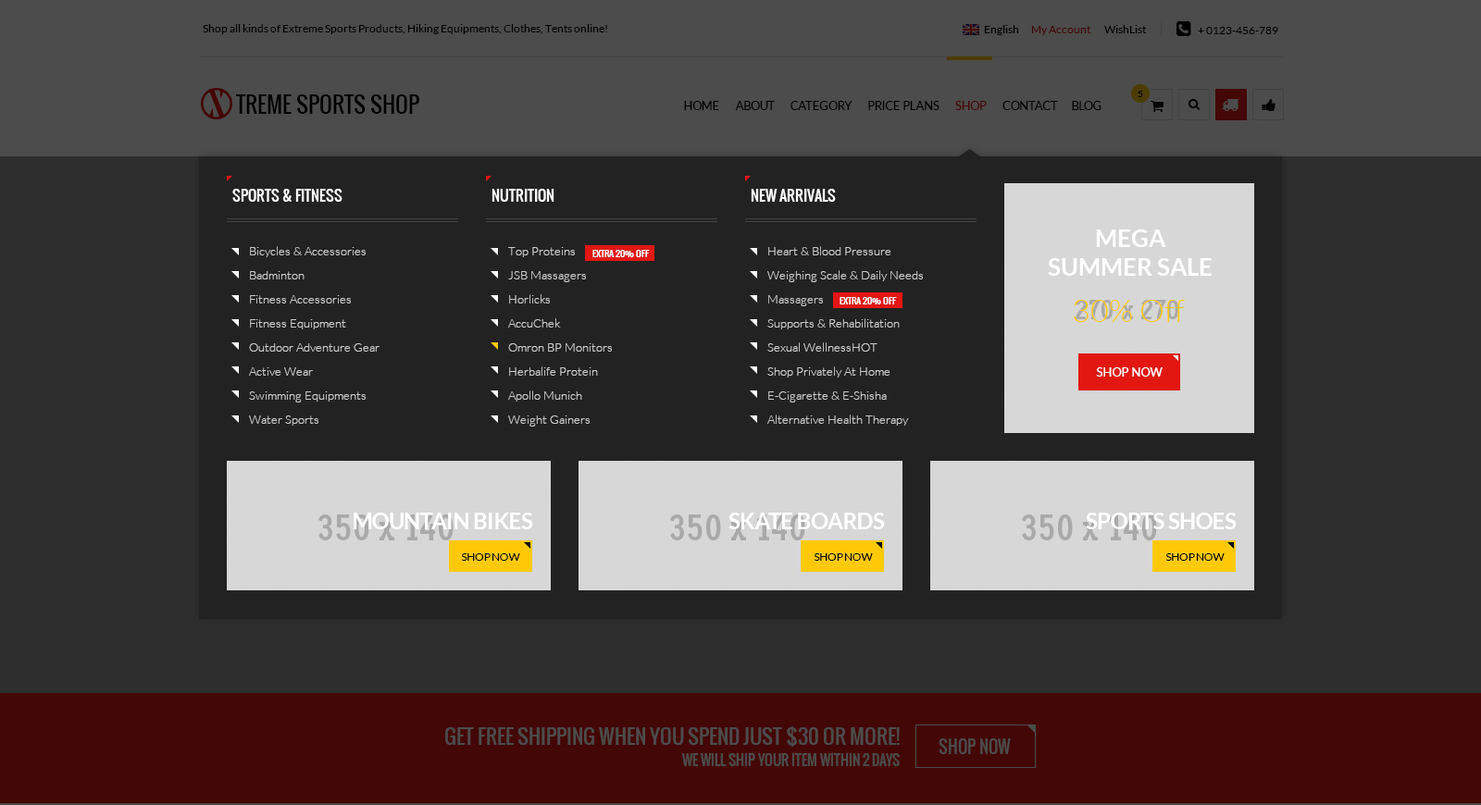
<style>
.page{position:relative;width:1481px;height:805px;background:#2e2e2e}
.page>*{position:absolute;margin:0}
.t1{font:14.8px "Oswald-Regular";color:#ffffff}
.t2{font:24.1px/28.9px "Lato-Bold";color:#ffffff}
.t3{font:12px/24.1px "Lato-Light";color:#cccccc}
.t4{font:9.3px "Oswald-Regular";color:#ffffff}
.t5{font:31.5px "Lato-Light";color:#ffc908}
.t6{font:12px "Lato-Regular";color:#ffffff}
.t7{font:22.2px "Lato-Bold";letter-spacing:-0.03em;color:#ffffff}
.t8{font:11.1px "Lato-Regular";letter-spacing:-0.025em;color:#000000}
</style>
<div class="page">
<p class="t1" style="left:232px;top:189px;width:110px;height:13px">SPORTS &amp; FITNESS</p>
<p class="t1" style="left:491px;top:189px;width:63px;height:13px">NUTRITION</p>
<p class="t1" style="left:751px;top:189px;width:85px;height:13px">NEW ARRIVALS</p>
<p class="t2" style="left:1048px;top:230px;width:164px;height:46px;text-align:center">MEGA<br>SUMMER SALE</p>
<p class="t3" style="left:249px;top:246px;width:130px;height:180px">Bicycles &amp; Accessories<br>Badminton<br>Fitness Accessories<br>Fitness Equipment<br>Outdoor Adventure Gear<br>Active Wear<br>Swimming Equipments<br>Water Sports</p>
<p class="t3" style="left:508px;top:247px;width:104px;height:180px">Top Proteins<br>JSB Massagers<br>Horlicks<br>AccuChek<br>Omron BP Monitors<br>Herbalife Protein<br>Apollo Munich<br>Weight Gainers</p>
<p class="t4" style="left:592px;top:250px;width:58px;height:7px">EXTRA 20% OFF</p>
<p class="t3" style="left:767px;top:246px;width:156px;height:180px">Heart &amp; Blood Pressure<br>Weighing Scale &amp; Daily Needs<br>Massagers<br>Supports &amp; Rehabilitation<br>Sexual WellnessHOT<br>Shop Privately At Home<br>E-Cigarette &amp; E-Shisha<br>Alternative Health Therapy</p>
<p class="t4" style="left:839px;top:297px;width:58px;height:8px">EXTRA 20% OFF</p>
<p class="t5" style="left:1074px;top:300px;width:111px;height:22px">30% Off</p>
<p class="t6" style="left:1096px;top:367px;width:66px;height:10px">SHOP NOW</p>
<p class="t7" style="left:354px;top:513px;width:179px;height:16px">MOUNTAIN BIKES</p>
<p class="t7" style="left:728px;top:513px;width:157px;height:16px">SKATE BOARDS</p>
<p class="t7" style="left:1086px;top:513px;width:151px;height:16px">SPORTS SHOES</p>
<p class="t8" style="left:461px;top:553px;width:59px;height:8px">SHOP NOW</p>
<p class="t8" style="left:814px;top:553px;width:59px;height:8px">SHOP NOW</p>
<p class="t8" style="left:1165px;top:553px;width:59px;height:8px">SHOP NOW</p>
</div>
